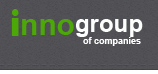
<style>
.page{position:relative;width:158px;height:74px}
.page>*{position:absolute;margin:0}
.t1{font:36px "Bauhaus93";color:#4ba806}
.t2{font:30px "Arial-BoldMT";color:#4ba806}
.t3{font:24px "Arial-BoldMT";color:#fcfefb}
.t4{font:9px "Arial-BoldMT";color:#fcfefb}
</style>
<div class="page">
<p class="t1" style="left:11px;top:9px;width:8px;height:27px">i</p>
<p class="t2" style="left:22px;top:19px;width:52px;height:16px">nno</p>
<p class="t3" style="left:76px;top:19px;width:67px;height:18px">group</p>
<p class="t4" style="left:83px;top:37px;width:58px;height:9px">of companies</p>
</div>
